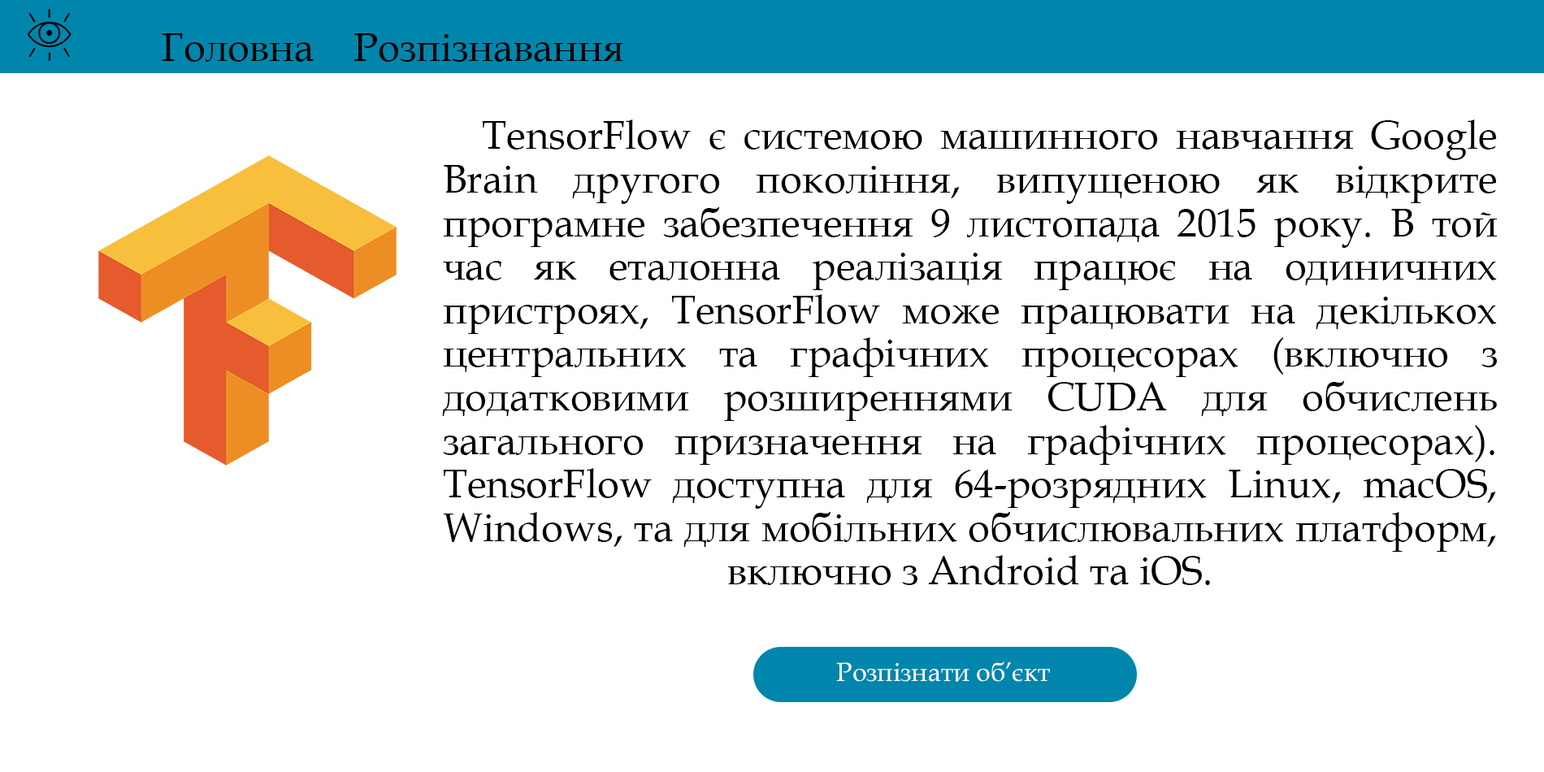
<style>
.page{position:relative;width:1544px;height:772px;background:#ffffff}
.page>*{position:absolute;margin:0}
.t1{font:39.8px "BookAntiqua";color:#000000}
.t2{font:39.8px/43.6px "BookAntiqua";color:#000000}
.t3{font:26px "BookAntiqua";color:#ffffff}
</style>
<div class="page">
<p class="t1" style="left:162px;top:33px;width:461px;height:29px">Головна    Розпізнавання</p>
<p class="t2" style="left:442px;top:119px;width:1056px;height:466px;text-align:justify">TensorFlow є системою машинного навчання Google Brain другого покоління, випущеною як відкрите програмне забезпечення 9 листопада 2015 року. В той час як еталонна реалізація працює на одиничних пристроях, TensorFlow може працювати на декількох центральних та графічних процесорах (включно з додатковими розширеннями CUDA для обчислень загального призначення на графічних процесорах). TensorFlow доступна для 64-розрядних Linux, macOS, Windows, та для мобільних обчислювальних платформ, включно з Android та iOS.</p>
<p class="t3" style="left:836px;top:662px;width:214px;height:20px">Розпізнати об’єкт</p>
</div>
